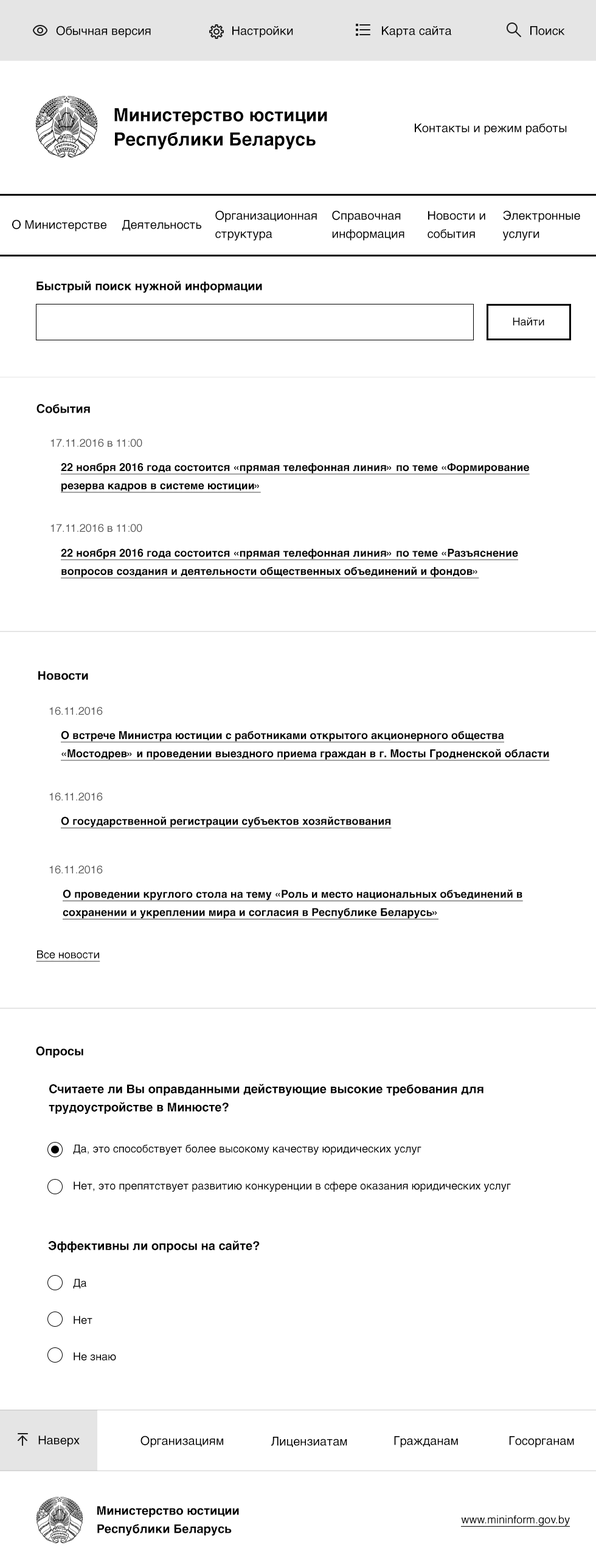
<style>
.page{position:relative;width:596px;height:1568px;background:#ffffff}
.page>*{position:absolute;margin:0}
.t1{font:12.2px "Helvetica";color:#000000}
.t2{font:18.2px/24.3px "Helvetica-Bold";color:#000000}
.t3{font:12.2px/18.2px "Helvetica";color:#000000}
.t4{font:12.2px "Helvetica-Bold";color:#000000}
.t5{font:10.9px "Helvetica";color:#000000}
.t6{font:10.9px "Helvetica";color:#555555}
.t7{font:10.9px/24.3px "Helvetica-Bold";color:#000000;text-decoration:underline}
.t8{font:10.9px/18.2px "Helvetica-Bold";color:#000000;text-decoration:underline}
.t9{font:10.9px "Helvetica-Bold";color:#000000;text-decoration:underline}
.t10{font:10.9px "Helvetica";color:#000000;text-decoration:underline}
.t11{font:12.2px/18.2px "Helvetica-Bold";color:#000000}
</style>
<div class="page">
<p class="t1" style="left:56px;top:26px;width:95px;height:12px">Обычная версия</p>
<p class="t1" style="left:232px;top:26px;width:61px;height:12px">Настройки</p>
<p class="t1" style="left:382px;top:26px;width:70px;height:12px">Карта сайта</p>
<p class="t1" style="left:530px;top:26px;width:35px;height:9px">Поиск</p>
<p class="t2" style="left:114px;top:108px;width:213px;height:42px">Министерство юстиции<br>Республики Беларусь</p>
<p class="t1" style="left:414px;top:123px;width:152px;height:12px">Контакты и режим работы</p>
<p class="t1" style="left:12px;top:219px;width:94px;height:13px">О Министерстве</p>
<p class="t1" style="left:122px;top:220px;width:79px;height:11px">Деятельность</p>
<p class="t3" style="left:215px;top:210px;width:102px;height:31px">Организационная<br>структура</p>
<p class="t3" style="left:332px;top:210px;width:72px;height:31px">Справочная<br>информация</p>
<p class="t3" style="left:427px;top:211px;width:58px;height:27px">Новости и<br>события</p>
<p class="t3" style="left:502px;top:210px;width:78px;height:31px">Электронные<br>услуги</p>
<p class="t4" style="left:36px;top:281px;width:226px;height:12px">Быстрый поиск нужной информации</p>
<p class="t5" style="left:512px;top:317px;width:32px;height:9px">Найти</p>
<p class="t4" style="left:36px;top:404px;width:54px;height:9px">События</p>
<p class="t6" style="left:50px;top:439px;width:92px;height:8px">17.11.2016 в 11:00</p>
<p class="t7" style="left:61px;top:463px;width:468px;height:30px">22 ноября 2016 года состоится «прямая телефонная линия» по теме <span class="t8">«Формирование резерва кадров в системе юстиции»</span></p>
<p class="t6" style="left:50px;top:524px;width:92px;height:8px">17.11.2016 в 11:00</p>
<p class="t8" style="left:61px;top:549px;width:457px;height:30px">22 ноября 2016 года состоится «прямая телефонная линия» по теме «Разъяснение вопросов создания и деятельности общественных объединений и фондов»</p>
<p class="t4" style="left:38px;top:671px;width:50px;height:9px">Новости</p>
<p class="t6" style="left:49px;top:707px;width:54px;height:8px">16.11.2016</p>
<p class="t8" style="left:61px;top:731px;width:488px;height:30px">О встрече Министра юстиции с работниками открытого акционерного общества «Мостодрев» и проведении выездного приема граждан в г. Мосты Гродненской области</p>
<p class="t6" style="left:49px;top:793px;width:54px;height:8px">16.11.2016</p>
<p class="t9" style="left:61px;top:816px;width:330px;height:12px">О государственной регистрации субъектов хозяйствования</p>
<p class="t6" style="left:49px;top:865px;width:54px;height:9px">16.11.2016</p>
<p class="t8" style="left:63px;top:889px;width:460px;height:31px">О проведении круглого стола на тему «Роль и место национальных объединений в сохранении и укреплении мира и согласия в Республике Беларусь»</p>
<p class="t10" style="left:36px;top:950px;width:64px;height:12px">Все новости</p>
<p class="t4" style="left:36px;top:1046px;width:47px;height:12px">Опросы</p>
<p class="t11" style="left:49px;top:1084px;width:434px;height:30px">Считаете ли Вы оправданными действующие высокие требования для трудоустройстве в Минюсте?</p>
<p class="t5" style="left:73px;top:1144px;width:348px;height:11px">Да, это способствует более высокому качеству юридических услуг</p>
<p class="t5" style="left:74px;top:1181px;width:437px;height:11px">Нет, это препятствует развитию конкуренции в сфере оказания юридических услуг</p>
<p class="t4" style="left:48px;top:1240px;width:212px;height:13px">Эффективны ли опросы на сайте?</p>
<p class="t5" style="left:73px;top:1279px;width:13px;height:9px">Да</p>
<p class="t5" style="left:74px;top:1316px;width:18px;height:8px">Нет</p>
<p class="t5" style="left:74px;top:1352px;width:42px;height:9px">Не знаю</p>
<p class="t1" style="left:38px;top:1436px;width:42px;height:11px">Наверх</p>
<p class="t1" style="left:140px;top:1436px;width:83px;height:12px">Организациям</p>
<p class="t1" style="left:271px;top:1437px;width:76px;height:10px">Лицензиатам</p>
<p class="t1" style="left:394px;top:1436px;width:64px;height:12px">Гражданам</p>
<p class="t1" style="left:509px;top:1436px;width:65px;height:12px">Госорганам</p>
<p class="t11" style="left:97px;top:1506px;width:142px;height:30px">Министерство юстиции<br>Республики Беларусь</p>
<p class="t10" style="left:461px;top:1515px;width:108px;height:12px">www.mininform.gov.by</p>
</div>
